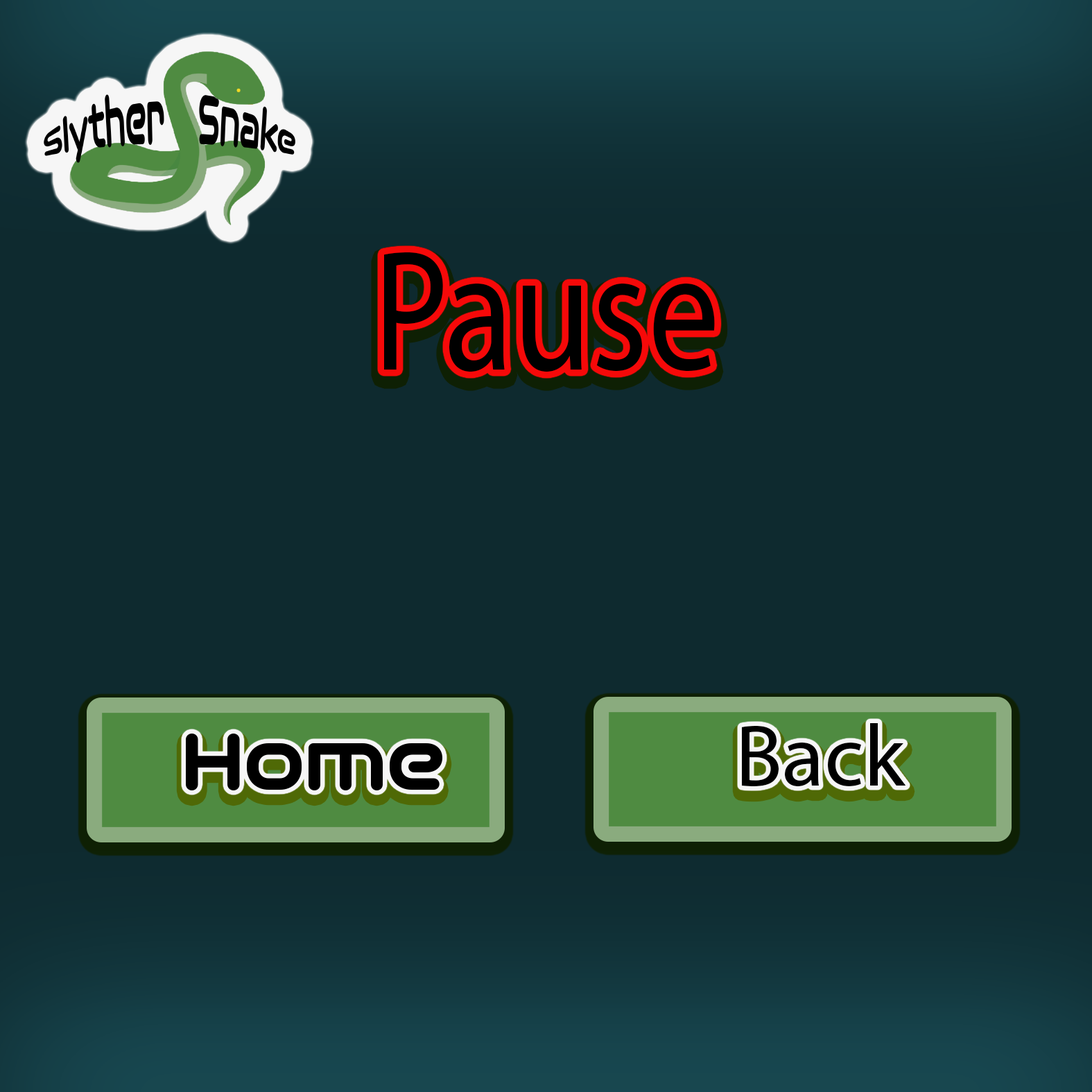
<style>
.page{position:relative;width:1092px;height:1092px;background:#0e2a2f}
.page>*{position:absolute;margin:0}
.t1{font:173.1px "MyriadPro-Regular";color:#000000;scale:0.82 1}
.t2{font:87.5px "MyriadPro-Regular";color:#000000}
.t3{font:87.5px "OmniumWide-ExtraBold";color:#000000}
</style>
<div class="page">
<p class="t1" style="left:384px;top:252px;width:331px;height:120px">Pause</p>
<p class="t2" style="left:742px;top:723px;width:164px;height:64px">Back</p>
<p class="t3" style="left:186px;top:734px;width:256px;height:56px">Home</p>
</div>
